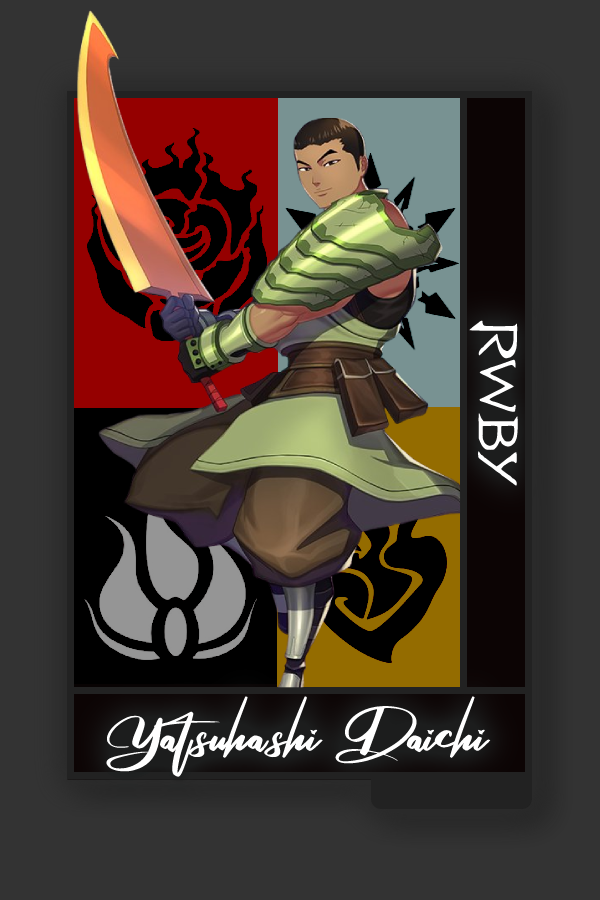
<style>
.page{position:relative;width:600px;height:900px;background:#333333}
.page>*{position:absolute;margin:0}
.t1{font:61.3px "RWBY_Style";color:#ffffff;scale:1.25 1}
.t2{font:76.6px "RosegaFREE";color:#ffffff;scale:0.91 1}
</style>
<div class="page">
<p class="t1" style="left:469px;top:320px;width:49px;height:166px;rotate:90deg">RWBY</p>
<p class="t2" style="left:106px;top:696px;width:385px;height:82px">Yatsuhashi Daichi</p>
</div>
